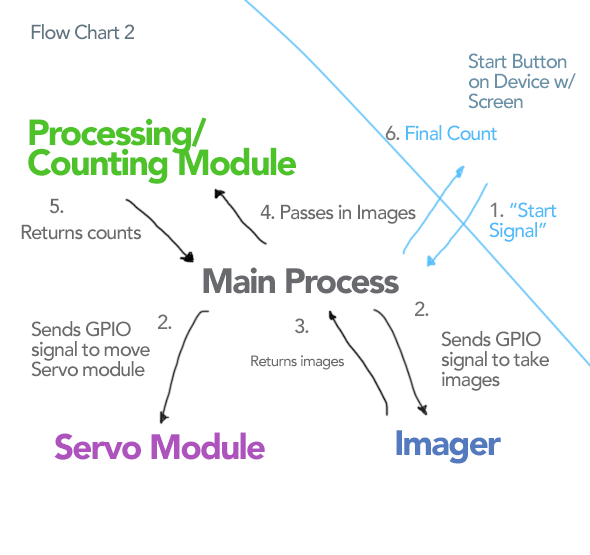
<style>
.page{position:relative;width:590px;height:555px;background:#ffffff}
.page>*{position:absolute;margin:0}
.t1{font:20px "Avenir-Medium";letter-spacing:-0.05em;color:#607581}
.t2{font:20px/20px "Avenir-Medium";letter-spacing:-0.05em;color:#6991a8}
.t3{font:36px/30px "Avenir-Black";letter-spacing:-0.05em;color:#4dc329}
.t4{font:20px "Avenir-Medium";letter-spacing:-0.05em;color:#51bcf9}
.t5{font:20px "Avenir-Medium";letter-spacing:-0.05em;color:#757575}
.t6{font:20px "Avenir-Medium";letter-spacing:-0.05em;color:#6b6b6b}
.t7{font:20px/20px "Avenir-Medium";letter-spacing:-0.05em;color:#51bcf9}
.t8{font:20px/20px "Avenir-Medium";letter-spacing:-0.05em;color:#767676}
.t9{font:35px "Avenir-Black";letter-spacing:-0.05em;color:#686a6d}
.t10{font:20px "Avenir-Medium";letter-spacing:-0.05em;color:#6f6f6f}
.t11{font:20px/20px "Avenir-Medium";letter-spacing:-0.05em;color:#6b6b6b}
.t12{font:15px "Avenir-Medium";letter-spacing:-0.05em;color:#6b6b6b}
.t13{font:35px "Avenir-Black";letter-spacing:-0.05em;color:#ae53be}
.t14{font:35px "Avenir-Black";letter-spacing:-0.05em;color:#5379be}
</style>
<div class="page">
<p class="t1" style="left:31px;top:24px;width:103px;height:16px">Flow Chart 2</p>
<p class="t2" style="left:468px;top:53px;width:108px;height:56px">Start Button<br>on Device w/<br>Screen</p>
<p class="t3" style="left:28px;top:117px;width:268px;height:67px">Processing/<br>Counting Module</p>
<p class="t4" style="left:385px;top:125px;width:112px;height:16px"><span class="t5">6.</span> Final Count</p>
<p class="t6" style="left:49px;top:198px;width:15px;height:16px">5.</p>
<p class="t6" style="left:260px;top:204px;width:156px;height:20px">4. Passes in Images</p>
<p class="t7" style="left:489px;top:202px;width:68px;height:40px"><span class="t8">1.</span> “Start<br>Signal”</p>
<p class="t6" style="left:21px;top:224px;width:120px;height:16px">Returns counts</p>
<p class="t9" style="left:203px;top:267px;width:196px;height:27px">Main Process</p>
<p class="t10" style="left:415px;top:301px;width:14px;height:15px">2.</p>
<p class="t10" style="left:158px;top:314px;width:14px;height:15px">2.</p>
<p class="t10" style="left:295px;top:318px;width:14px;height:16px">3.</p>
<p class="t11" style="left:31px;top:321px;width:119px;height:56px">Sends GPIO<br>signal to move<br>Servo module</p>
<p class="t11" style="left:441px;top:331px;width:108px;height:60px">Sends GPIO<br>signal to take<br>images</p>
<p class="t12" style="left:251px;top:355px;width:93px;height:15px">Returns images</p>
<p class="t13" style="left:54px;top:432px;width:211px;height:28px">Servo Module</p>
<p class="t14" style="left:396px;top:430px;width:105px;height:34px">Imager</p>
</div>
